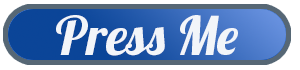
<style>
.page{position:relative;width:300px;height:70px;background:#ffffff}
.page>*{position:absolute;margin:0}
.t1{font:53.5px "Lobster1.4";color:#f2f5f9}
</style>
<div class="page">
<p class="t1" style="left:56px;top:15px;width:182px;height:41px">Press Me</p>
</div>
